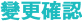
<style>
.page{position:relative;width:82px;height:21px;background:#1dbcbf}
.page>*{position:absolute;margin:0}
.t1{font:20px "GothicMB101Pr6N-Medium";color:#1dbcbf;font-weight:bold}
</style>
<div class="page">
<p class="t1" style="left:0px;top:0px;width:83px;height:21px">變更確認</p>
</div>
